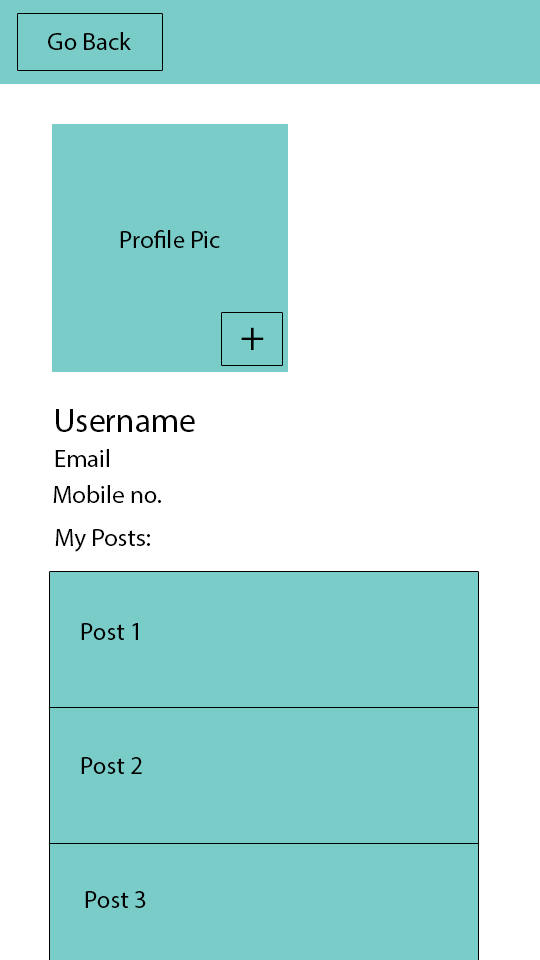
<style>
.page{position:relative;width:540px;height:960px;background:#7accc8}
.page>*{position:absolute;margin:0}
.t1{font:25px "MyriadPro-Regular";color:#000000}
.t2{font:41.7px "MyriadPro-Regular";color:#000000}
.t3{font:33.3px "MyriadPro-Regular";color:#000000}
</style>
<div class="page">
<p class="t1" style="left:48px;top:32px;width:83px;height:18px">Go Back</p>
<p class="t1" style="left:120px;top:230px;width:100px;height:18px">Profile Pic</p>
<p class="t2" style="left:241px;top:327px;width:23px;height:23px">+</p>
<p class="t3" style="left:56px;top:409px;width:139px;height:23px">Username</p>
<p class="t1" style="left:55px;top:449px;width:54px;height:18px">Email</p>
<p class="t1" style="left:53px;top:485px;width:108px;height:18px">Mobile no.</p>
<p class="t1" style="left:55px;top:529px;width:95px;height:23px">My Posts:</p>
<p class="t1" style="left:81px;top:623px;width:57px;height:17px">Post 1</p>
<p class="t1" style="left:81px;top:757px;width:61px;height:17px">Post 2</p>
<p class="t1" style="left:85px;top:891px;width:61px;height:17px">Post 3</p>
</div>
